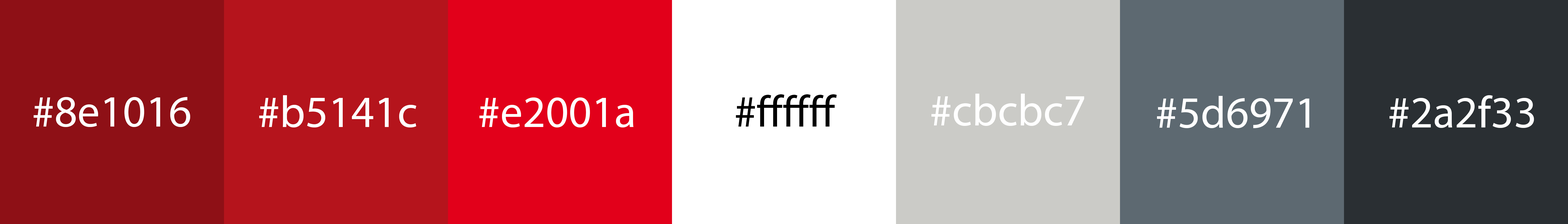
<style>
.page{position:relative;width:1568px;height:224px}
.page>*{position:absolute;margin:0}
.t1{font:44.8px "MyriadPro-Regular";color:#ffffff}
</style>
<div class="page">
<p class="t1" style="left:34px;top:97px;width:156px;height:30px">#8e1016</p>
<p class="t1" style="left:259px;top:95px;width:157px;height:32px">#b5141c</p>
<p class="t1" style="left:479px;top:97px;width:154px;height:30px">#e2001a</p>
<p class="t1" style="left:931px;top:94px;width:153px;height:32px">#cbcbc7</p>
<p class="t1" style="left:1157px;top:96px;width:152px;height:32px">#5d6971</p>
<p class="t1" style="left:1389px;top:95px;width:145px;height:33px">#2a2f33</p>
</div>
